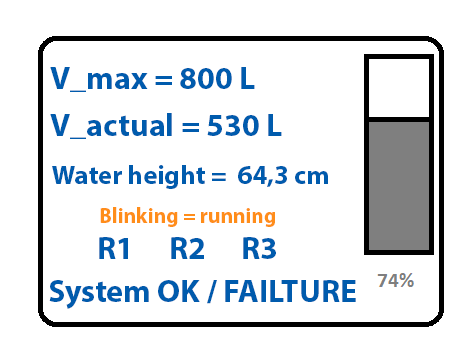
<style>
.page{position:relative;width:474px;height:359px;background:#ffffff}
.page>*{position:absolute;margin:0}
.t1{font:32px "MyriadPro-Bold";color:#005bad}
.t2{font:26.7px "MyriadPro-Bold";color:#005bad}
.t3{font:21.3px "MyriadPro-Bold";color:#ff8d1a}
</style>
<div class="page">
<p class="t1" style="left:50px;top:67px;width:205px;height:25px">V_max = 800 L</p>
<p class="t1" style="left:50px;top:113px;width:232px;height:26px">V_actual = 530 L</p>
<p class="t2" style="left:52px;top:165px;width:276px;height:24px">Water height =  64,3 cm</p>
<p class="t3" style="left:100px;top:207px;width:175px;height:20px">Blinking = running</p>
<p class="t1" style="left:99px;top:237px;width:177px;height:22px">R1 R2 R3</p>
<p class="t1" style="left:49px;top:280px;width:307px;height:29px">System OK / FAILTURE</p>
</div>
